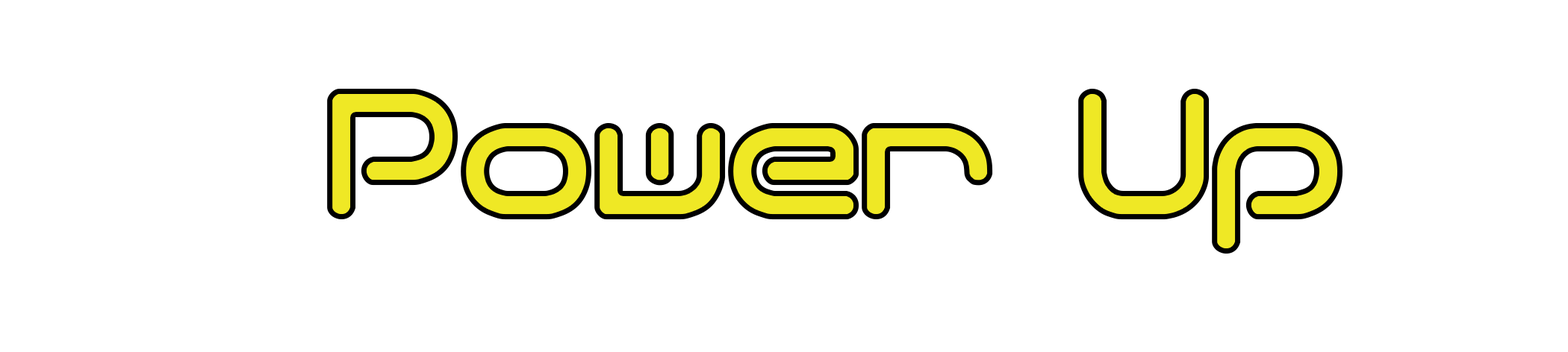
<style>
.page{position:relative;width:1568px;height:352px;background:#ffffff}
.page>*{position:absolute;margin:0}
.t1{font:164.9px "QuantumRoundBRK";color:#efe825}
</style>
<div class="page">
<p class="t1" style="left:327px;top:89px;width:1016px;height:165px">Power Up</p>
</div>
